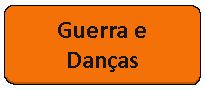
<style>
.page{position:relative;width:205px;height:90px;background:#f47107}
.page>*{position:absolute;margin:0}
.t1{font:25px "Calibri-Bold";color:#141619}
</style>
<div class="page">
<p class="t1" style="left:58px;top:22px;width:88px;height:50px;text-align:center">Guerra e Danças</p>
</div>
